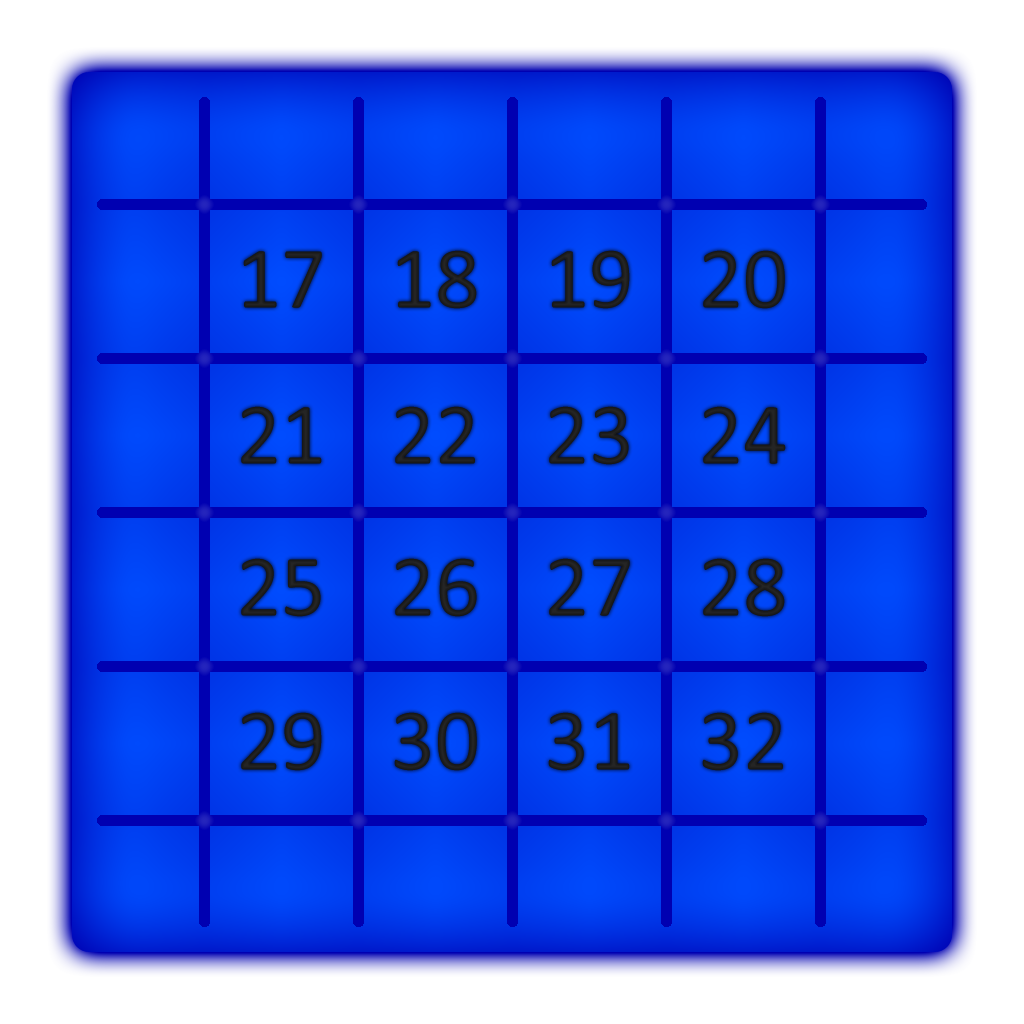
<style>
.page{position:relative;width:1024px;height:1024px}
.page>*{position:absolute;margin:0}
.t1{font:88.5px "Calibri";color:#1e1e1e}
.t2{font:88.5px "Calibri";color:#1d1d1d}
</style>
<div class="page">
<p class="t1" style="left:243px;top:251px;width:79px;height:57px">17</p>
<p class="t1" style="left:397px;top:250px;width:80px;height:59px">18</p>
<p class="t1" style="left:551px;top:250px;width:79px;height:59px">19</p>
<p class="t1" style="left:703px;top:250px;width:82px;height:59px">20</p>
<p class="t1" style="left:241px;top:406px;width:81px;height:58px">21</p>
<p class="t1" style="left:395px;top:406px;width:80px;height:58px">22</p>
<p class="t2" style="left:549px;top:406px;width:80px;height:59px">23</p>
<p class="t2" style="left:703px;top:406px;width:83px;height:58px">24</p>
<p class="t1" style="left:241px;top:558px;width:80px;height:59px">25</p>
<p class="t1" style="left:395px;top:558px;width:82px;height:59px">26</p>
<p class="t1" style="left:549px;top:558px;width:81px;height:58px">27</p>
<p class="t2" style="left:703px;top:558px;width:82px;height:59px">28</p>
<p class="t2" style="left:241px;top:712px;width:81px;height:59px">29</p>
<p class="t1" style="left:394px;top:712px;width:83px;height:59px">30</p>
<p class="t1" style="left:548px;top:712px;width:82px;height:59px">31</p>
<p class="t2" style="left:702px;top:712px;width:81px;height:59px">32</p>
</div>
